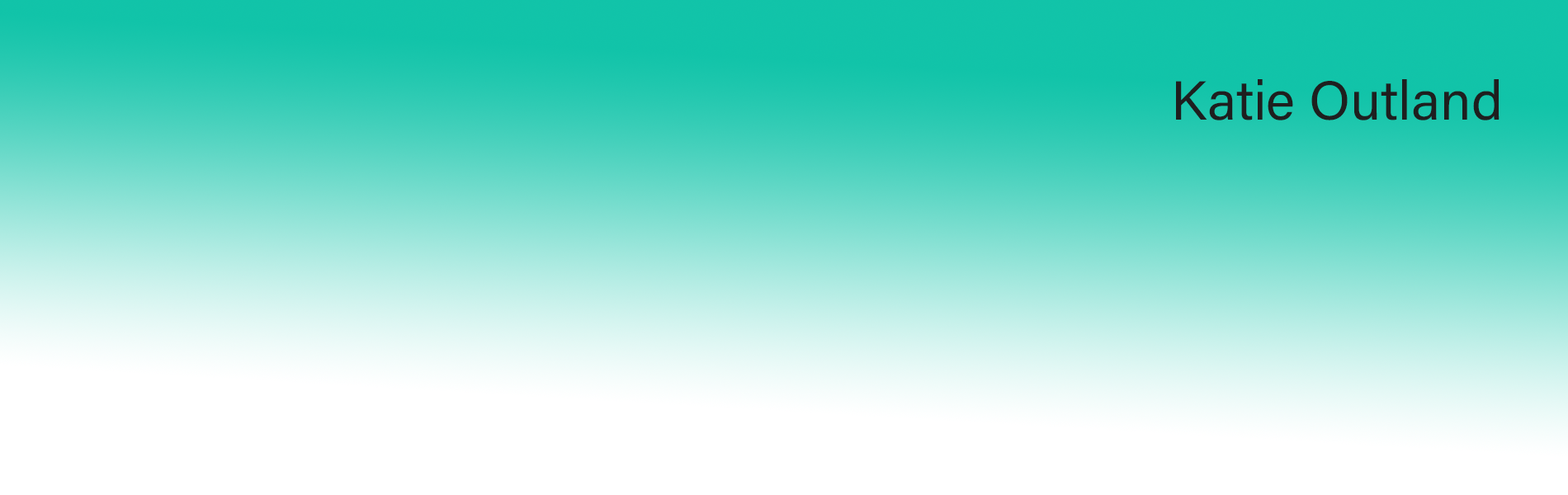
<style>
.page{position:relative;width:1568px;height:495px}
.page>*{position:absolute;margin:0}
.t1{font:55px "AcuminConcept-Regular";color:#1e1f1f}
</style>
<div class="page">
<p class="t1" style="left:1176px;top:79px;width:324px;height:41px">Katie Outland</p>
</div>
